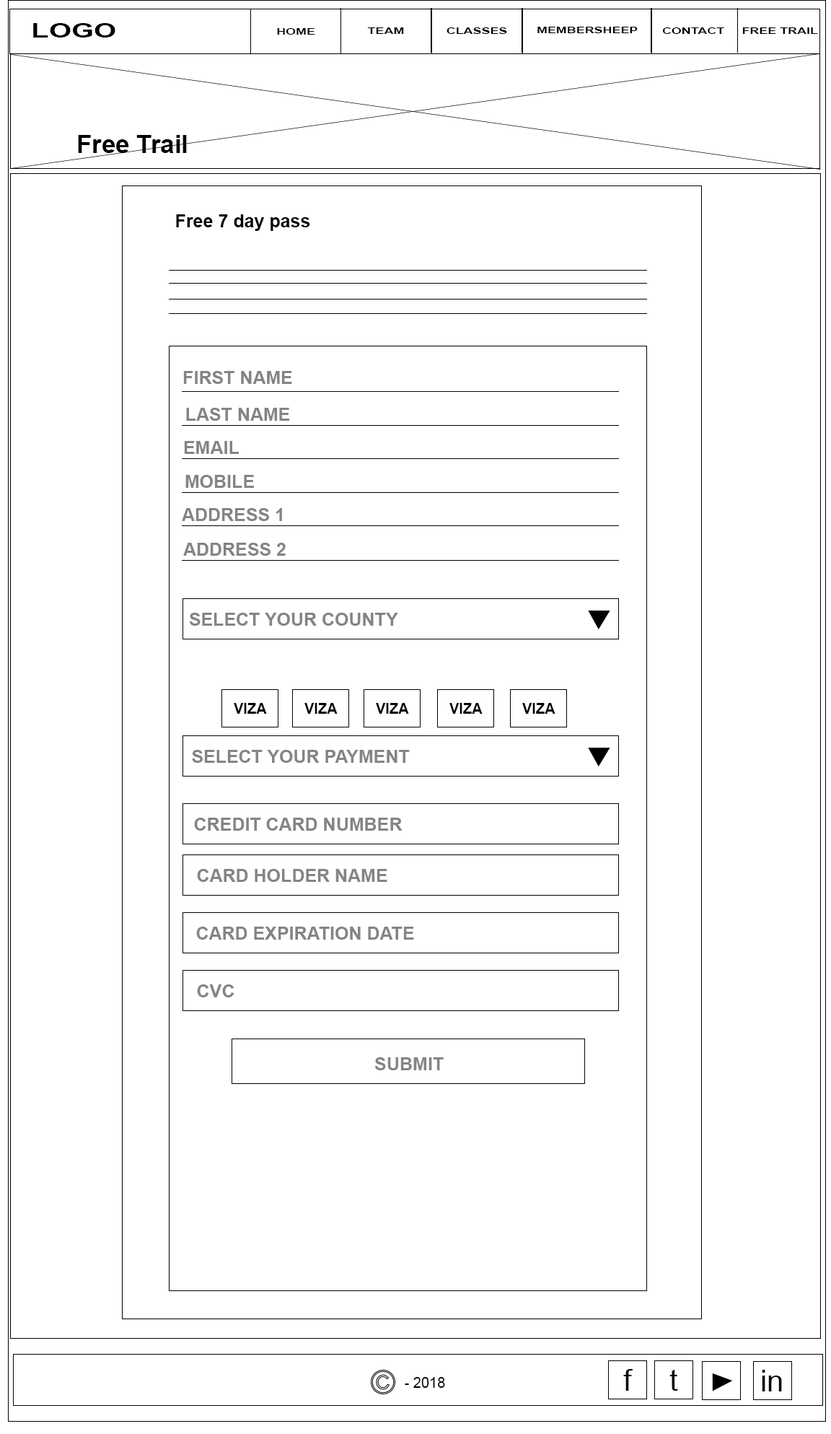
<style>
.page{position:relative;width:831px;height:1434px;background:#ffffff}
.page>*{position:absolute;margin:0}
.t1{font:19.3px "Arial-BoldMT";color:#000000;scale:1.49 1}
.t2{font:8.7px "Arial-BoldMT";color:#000000;scale:1.49 1}
.t3{font:25.1px "Arial-BoldMT";color:#000000}
.t4{font:18px "Arial-BoldMT";color:#000000}
.t5{font:18px "Arial-BoldMT";color:#868383}
.t6{font:14.4px "Arial-BoldMT";color:#000000}
.t7{font:29.9px "ArialMT";color:#000000}
.t8{font:14.4px "ArialMT";color:#000000}
</style>
<div class="page">
<p class="t1" style="left:33px;top:23px;width:82px;height:15px">LOGO</p>
<p class="t2" style="left:277px;top:28px;width:38px;height:7px">HOME</p>
<p class="t2" style="left:367px;top:27px;width:37px;height:7px">TEAM</p>
<p class="t2" style="left:447px;top:27px;width:60px;height:7px">CLASSES</p>
<p class="t2" style="left:538px;top:27px;width:100px;height:6px">MEMBERSHEEP</p>
<p class="t2" style="left:663px;top:27px;width:62px;height:7px">CONTACT</p>
<p class="t2" style="left:743px;top:27px;width:75px;height:7px">FREE TRAIL</p>
<p class="t3" style="left:78px;top:135px;width:109px;height:18px">Free Trail</p>
<p class="t4" style="left:176px;top:214px;width:134px;height:17px">Free 7 day pass</p>
<p class="t5" style="left:183px;top:371px;width:109px;height:13px">FIRST NAME</p>
<p class="t5" style="left:186px;top:408px;width:103px;height:13px">LAST NAME</p>
<p class="t5" style="left:184px;top:441px;width:55px;height:13px">EMAIL</p>
<p class="t5" style="left:185px;top:475px;width:69px;height:13px">MOBILE</p>
<p class="t5" style="left:182px;top:508px;width:100px;height:13px">ADDRESS 1</p>
<p class="t5" style="left:183px;top:543px;width:103px;height:13px">ADDRESS 2</p>
<p class="t5" style="left:189px;top:613px;width:209px;height:13px">SELECT YOUR COUNTY</p>
<p class="t6" style="left:234px;top:703px;width:33px;height:11px">VIZA</p>
<p class="t6" style="left:305px;top:703px;width:33px;height:11px">VIZA</p>
<p class="t6" style="left:376px;top:703px;width:33px;height:11px">VIZA</p>
<p class="t6" style="left:450px;top:703px;width:33px;height:11px">VIZA</p>
<p class="t6" style="left:523px;top:703px;width:33px;height:11px">VIZA</p>
<p class="t5" style="left:192px;top:750px;width:218px;height:13px">SELECT YOUR PAYMENT</p>
<p class="t5" style="left:194px;top:818px;width:209px;height:13px">CREDIT CARD NUMBER</p>
<p class="t5" style="left:197px;top:869px;width:191px;height:13px">CARD HOLDER NAME</p>
<p class="t5" style="left:196px;top:927px;width:218px;height:13px">CARD EXPIRATION DATE</p>
<p class="t5" style="left:197px;top:984px;width:38px;height:13px">CVC</p>
<p class="t5" style="left:375px;top:1057px;width:69px;height:13px">SUBMIT</p>
<p class="t7" style="left:624px;top:1369px;width:10px;height:22px">f</p>
<p class="t7" style="left:670px;top:1369px;width:8px;height:22px">t</p>
<p class="t7" style="left:762px;top:1370px;width:20px;height:22px">in</p>
<p class="t8" style="left:405px;top:1377px;width:40px;height:11px">- 2018</p>
</div>
